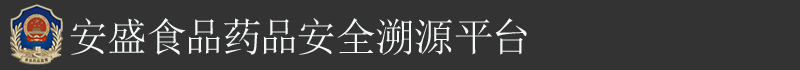
<style>
.page{position:relative;width:800px;height:70px;background:#333333}
.page>*{position:absolute;margin:0}
.t1{font:40px "SimSun";letter-spacing:0.05em;color:#f6f9f9}
</style>
<div class="page">
<p class="t1" style="left:70px;top:18px;width:457px;height:37px">安盛食品药品安全溯源平台</p>
</div>
